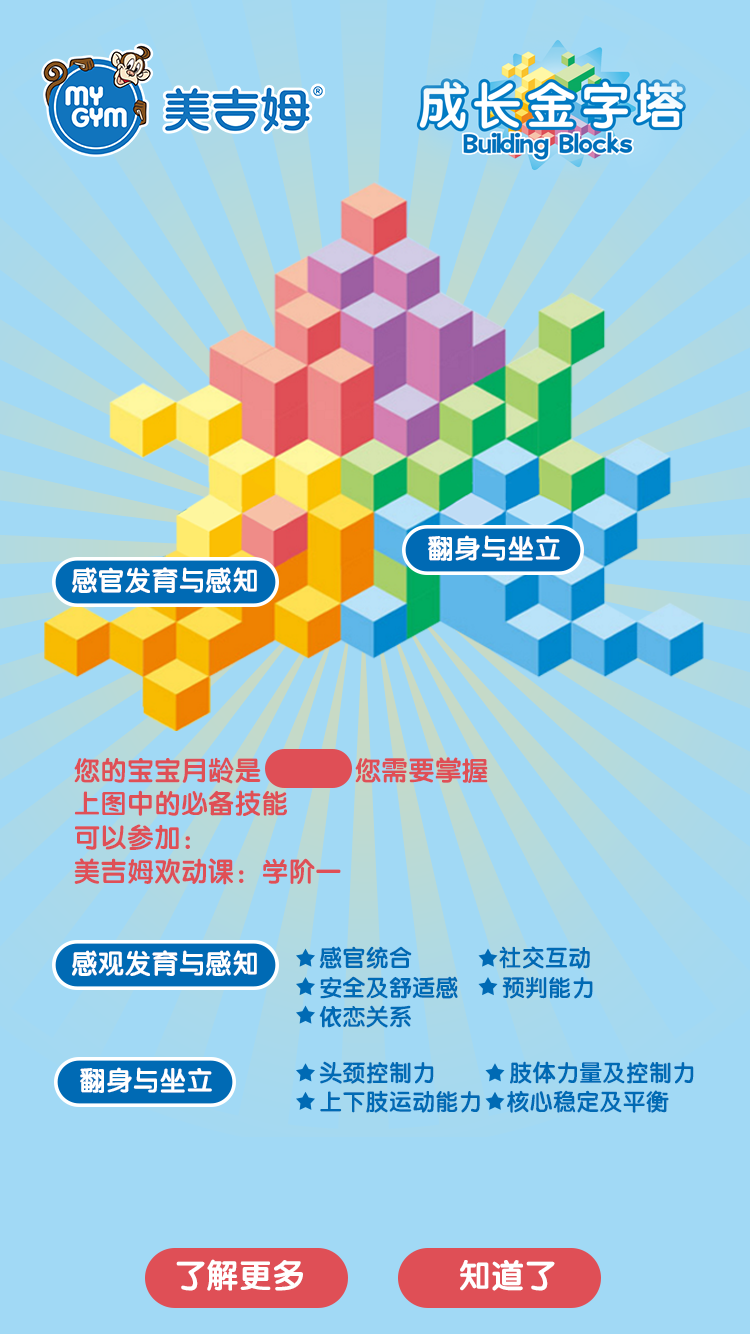
<style>
.page{position:relative;width:750px;height:1334px;background:#a1d9f5}
.page>*{position:absolute;margin:0}
.t1{font:27.2px "FZY4JW--GB1-0";color:#ffffff}
.t2{font:27.2px/39.4px "FZY4JW--GB1-0";color:#df4f56}
.t3{font:23.5px/34px "FZY4JW--GB1-0";color:#006ab4}
.t4{font:33px "FZY4JW--GB1-0";color:#ffffff}
</style>
<div class="page">
<p class="t1" style="left:428px;top:535px;width:132px;height:26px">翻身与坐立</p>
<p class="t1" style="left:72px;top:567px;width:185px;height:26px">感官发育与感知</p>
<p class="t2" style="left:74px;top:757px;width:414px;height:128px">您的宝宝月龄是             您需要掌握<br>上图中的必备技能<br>可以参加：<br>美吉姆欢动课：学阶一</p>
<p class="t1" style="left:72px;top:950px;width:185px;height:26px">感观发育与感知</p>
<p class="t3" style="left:319px;top:946px;width:274px;height:82px">感官统合              社交互动<br>安全及舒适感       预判能力<br>依恋关系</p>
<p class="t3" style="left:319px;top:1061px;width:375px;height:52px">头颈控制力            肢体力量及控制力<br>上下肢运动能力    核心稳定及平衡</p>
<p class="t1" style="left:80px;top:1067px;width:132px;height:26px">翻身与坐立</p>
<p class="t4" style="left:176px;top:1259px;width:127px;height:32px">了解更多</p>
<p class="t4" style="left:460px;top:1260px;width:95px;height:31px">知道了</p>
</div>
